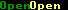
<style>
.page{position:relative;width:68px;height:10px;background:#000000}
.page>*{position:absolute;margin:0}
.t1{font:13.2px "Onesize";color:#009900;scale:0.91 1}
.t2{font:13.2px "Onesize";color:#ffff66;scale:0.91 1}
</style>
<div class="page">
<p class="t1" style="left:0px;top:1px;width:30px;height:10px">Open</p>
<p class="t2" style="left:30px;top:1px;width:30px;height:10px">Open</p>
</div>
